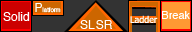
<style>
.page{position:relative;width:192px;height:32px;background:#333333}
.page>*{position:absolute;margin:0}
.t1{font:6px "Helvetica";color:#ffffff}
.t2{font:12px "Helvetica";color:#ffffff}
.t3{font:9px "Tahoma";color:#ffffff}
.t4{font:11px "Helvetica";color:#ffffff}
</style>
<div class="page">
<p class="t1" style="left:35px;top:3px;width:26px;height:10px"><span class="t2">P</span>latform</p>
<p class="t2" style="left:3px;top:12px;width:27px;height:9px">Solid</p>
<p class="t3" style="left:130px;top:15px;width:28px;height:8px">Ladder</p>
<p class="t4" style="left:162px;top:11px;width:28px;height:8px"><span class="t2"> </span>Break</p>
<p class="t2" style="left:80px;top:20px;width:15px;height:9px">SL</p>
<p class="t2" style="left:96px;top:20px;width:16px;height:9px">SR</p>
</div>
